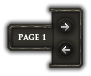
<style>
.page{position:relative;width:91px;height:76px;background:#ffffff}
.page>*{position:absolute;margin:0}
.t1{font:8px "TrajanPro-Bold";color:#fefefe}
</style>
<div class="page">
<p class="t1" style="left:18px;top:34px;width:28px;height:6px">Page 1</p>
</div>
